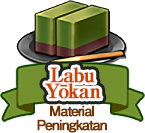
<style>
.page{position:relative;width:145px;height:133px;background:#ffffff}
.page>*{position:absolute;margin:0}
.t1{font:20px/16px "RyuminPro-ExBold";letter-spacing:-0.08em;color:#d04200;font-weight:bold}
.t2{font:14px/14px "FutoGoB101Pr5-Bold";letter-spacing:-0.08em;color:#703300;font-weight:bold}
</style>
<div class="page">
<p class="t1" style="left:45px;top:67px;width:56px;height:32px;text-align:center">Labu<br>Yōkan</p>
<p class="t2" style="left:37px;top:105px;width:70px;height:28px;text-align:center">Material<br>Peningkatan</p>
</div>
